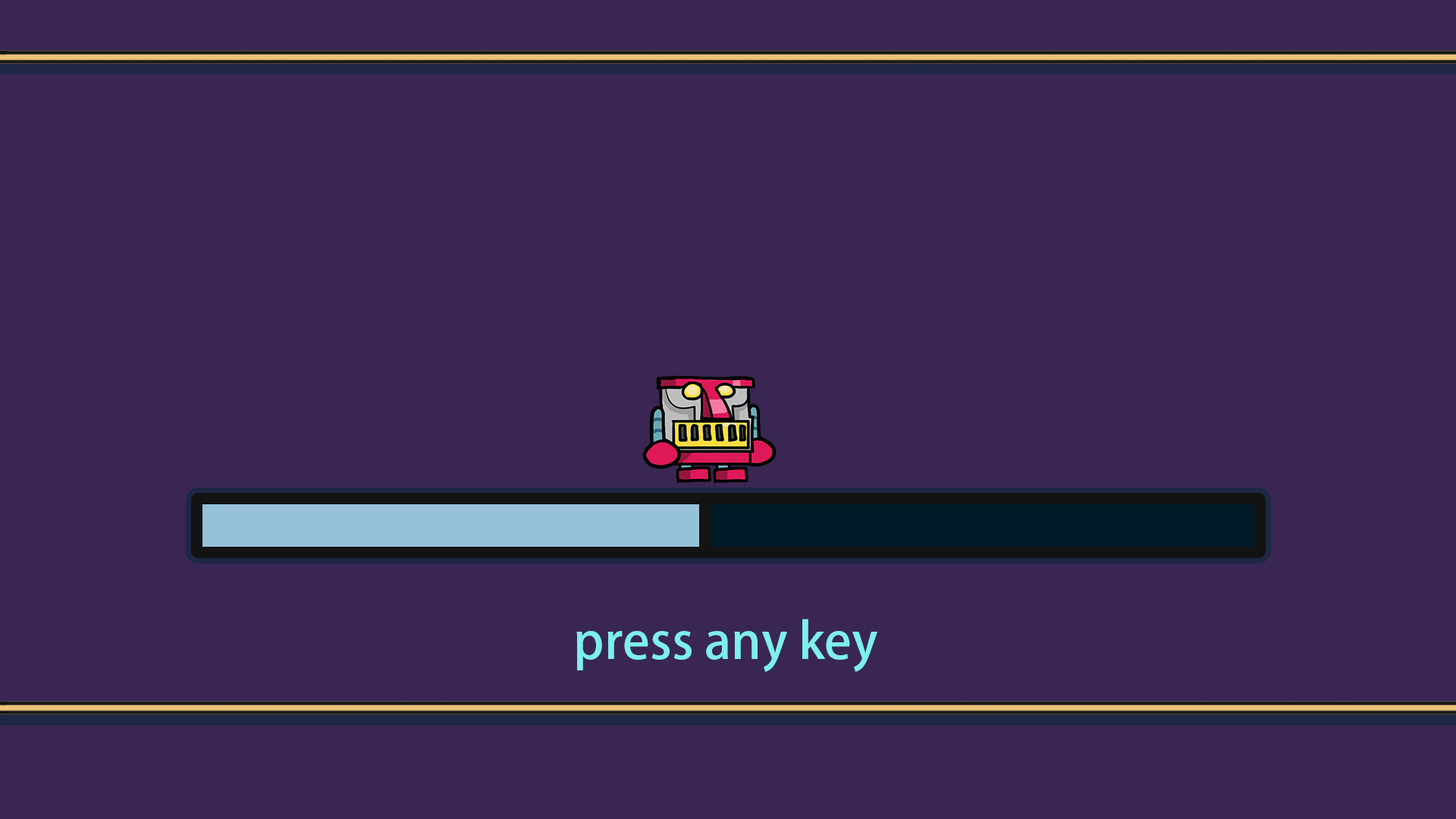
<style>
.page{position:relative;width:1456px;height:819px;background:#392653}
.page>*{position:absolute;margin:0}
.t1{font:12px "AdobeFanHeitiStd-Bold";color:#7eefeb}
</style>
<div class="page">
<p class="t1" style="left:576px;top:619px;width:301px;height:53px">press any key</p>
</div>
